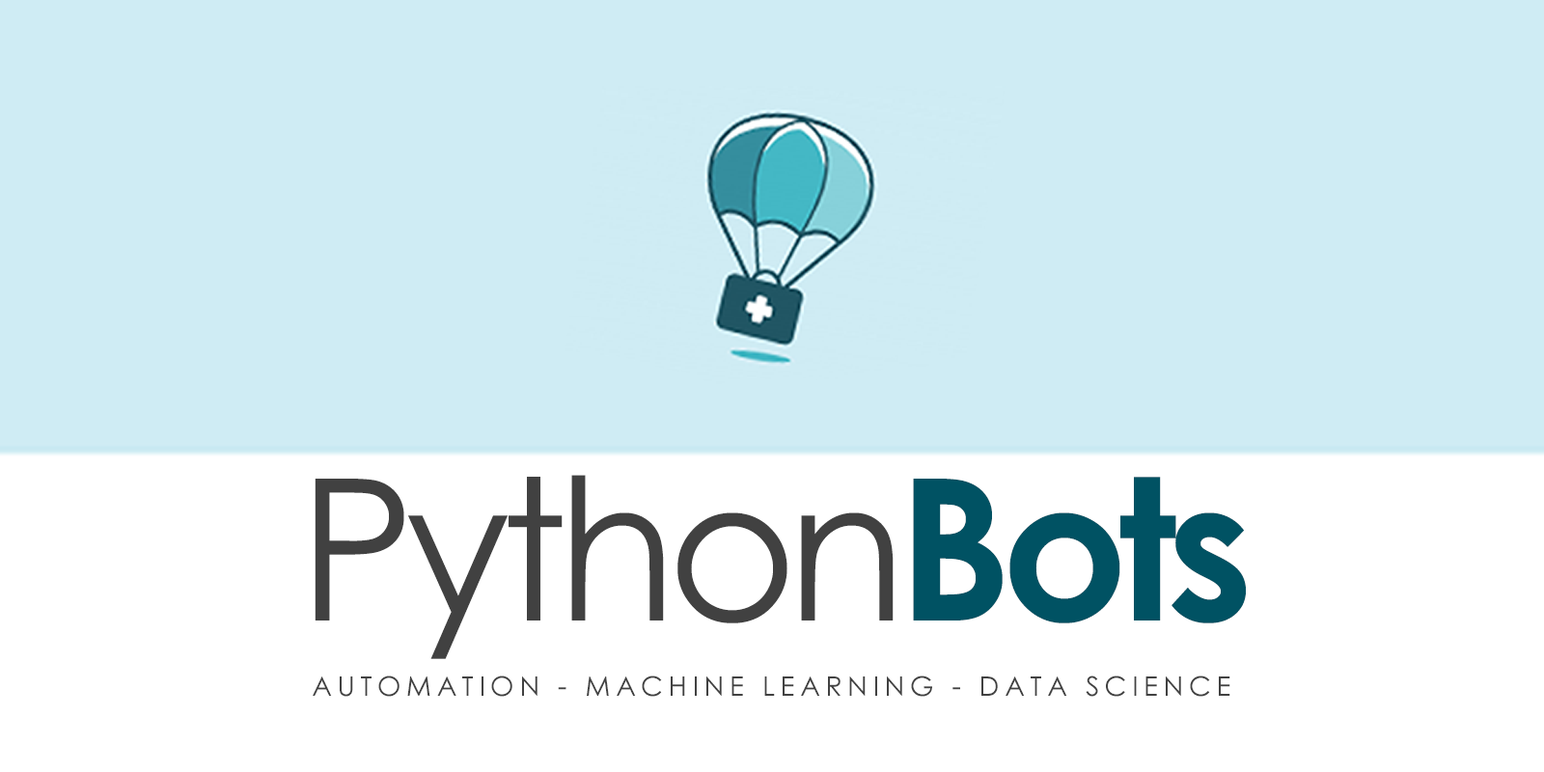
<style>
.page{position:relative;width:1544px;height:772px;background:#cfecf4}
.page>*{position:absolute;margin:0}
.t1{font:197.4px "CenturyGothic";letter-spacing:-0.05em;color:#414141}
.t2{font:197.4px "CenturyGothic-Bold";letter-spacing:-0.05em;color:#005263}
.t3{font:27.1px "CenturyGothic";letter-spacing:0.2em;color:#414141}
</style>
<div class="page">
<p class="t1" style="left:315px;top:475px;width:931px;height:184px">Python<span class="t2">Bots</span></p>
<p class="t3" style="left:313px;top:676px;width:918px;height:21px">AUTOMATION - MACHINE LEARNING - DATA SCIENCE</p>
</div>
